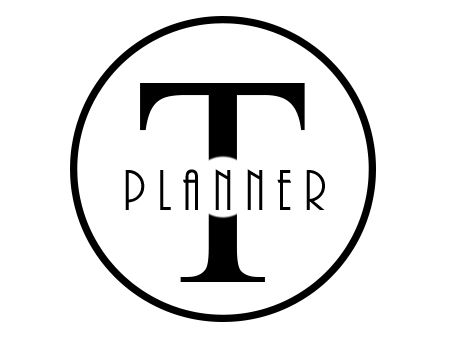
<style>
.page{position:relative;width:454px;height:340px;background:#ffffff}
.page>*{position:absolute;margin:0}
.t1{font:60px "ARBONNIE";letter-spacing:0.2em;color:#000000}
</style>
<div class="page">
<p class="t1" style="left:125px;top:169px;width:200px;height:41px">PLANNER</p>
</div>
